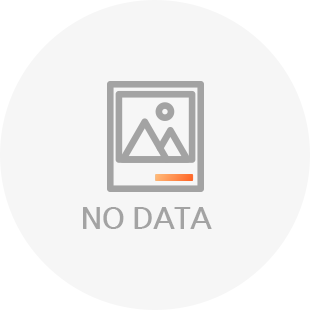
<style>
.page{position:relative;width:310px;height:310px;background:#f6f6f6}
.page>*{position:absolute;margin:0}
.t1{font:30px "NanumGothicBold";letter-spacing:-0.025em;color:#a3a3a3;text-transform:uppercase}
</style>
<div class="page">
<p class="t1" style="left:83px;top:207px;width:129px;height:22px">no DATA</p>
</div>
